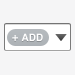
<style>
.page{position:relative;width:75px;height:75px;background:#f5f5f6}
.page>*{position:absolute;margin:0}
.t1{font:10px "Helvetica-Bold";color:#ffffff;text-transform:uppercase}
.t2{font:11px "Helvetica-Bold";color:#ffffff}
</style>
<div class="page">
<p class="t1" style="left:12px;top:33px;width:31px;height:8px"><span class="t2">+ </span>Add</p>
</div>
